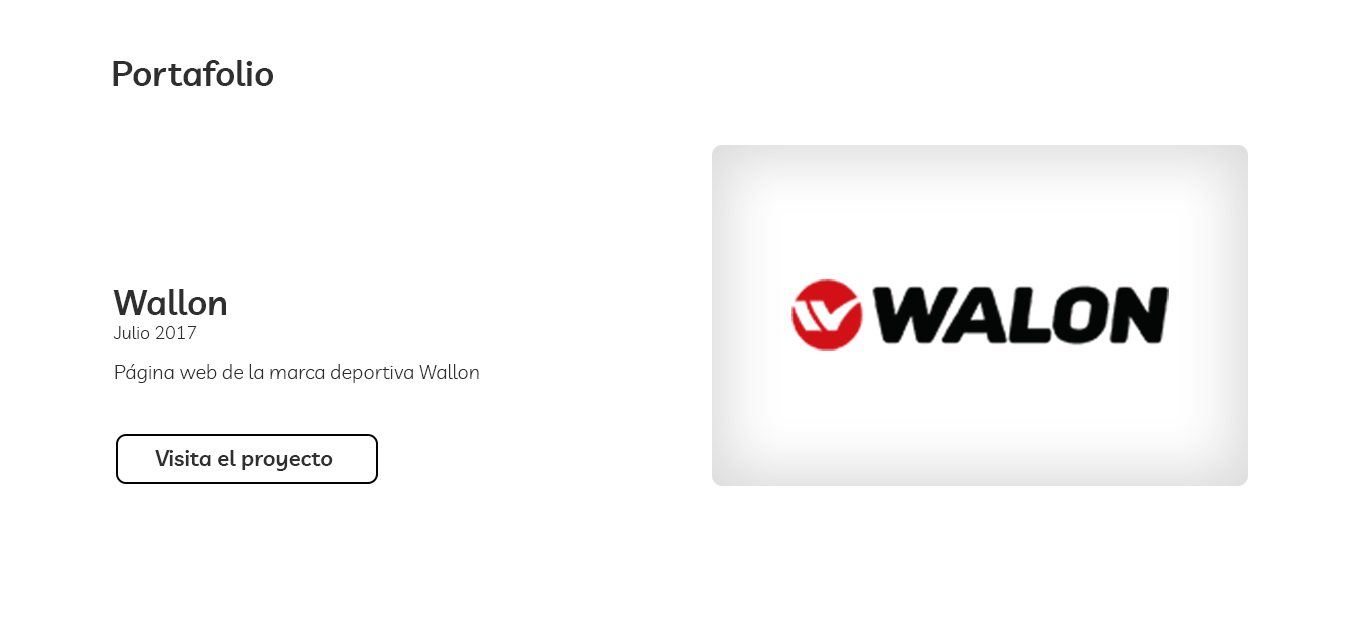
<style>
.page{position:relative;width:1360px;height:630px;background:#ffffff}
.page>*{position:absolute;margin:0}
.t1{font:35px "Livvic-SemiBold";color:#2f2f2f}
.t2{font:20px/40px "Livvic-Light";color:#2f2f2f}
.t3{font:18px/40px "Livvic-Light";color:#2f2f2f}
.t4{font:22px "Livvic-SemiBold";color:#2f2f2f}
</style>
<div class="page">
<p class="t1" style="left:113px;top:60px;width:160px;height:26px">Portafolio</p>
<p class="t1" style="left:113px;top:289px;width:114px;height:26px">Wallon</p>
<p class="t2" style="left:113px;top:326px;width:366px;height:57px"><span class="t3">Julio 2017<br></span>Página web de la marca deportiva Wallon</p>
<p class="t4" style="left:155px;top:450px;width:178px;height:21px">Visita el proyecto</p>
</div>
